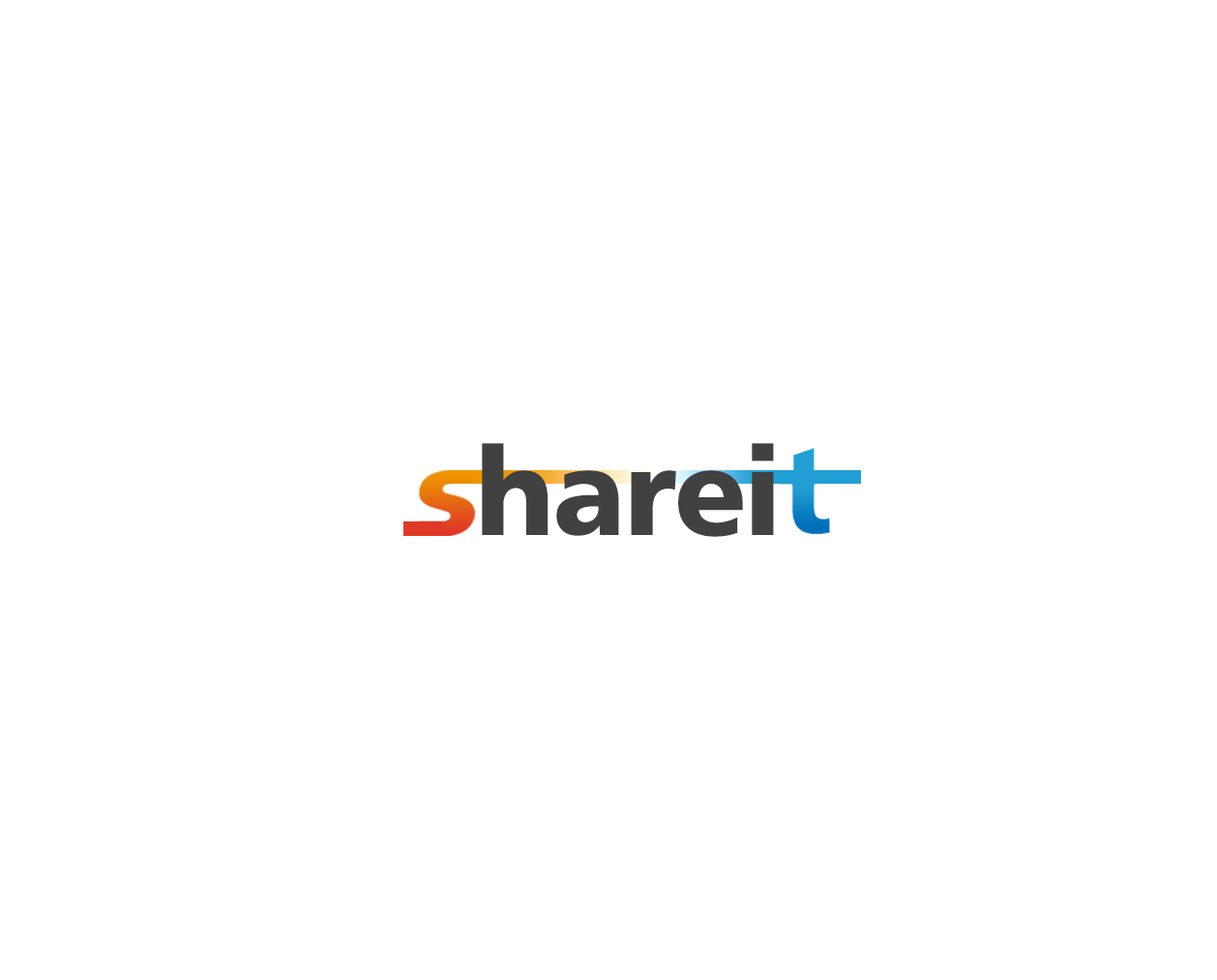
<style>
.page{position:relative;width:1217px;height:980px;background:#ffffff}
.page>*{position:absolute;margin:0}
.t1{font:121.7px "Humanist777BT-BlackB";letter-spacing:-0.02em;color:#414141}
</style>
<div class="page">
<p class="t1" style="left:420px;top:443px;width:411px;height:94px">shareit</p>
</div>
